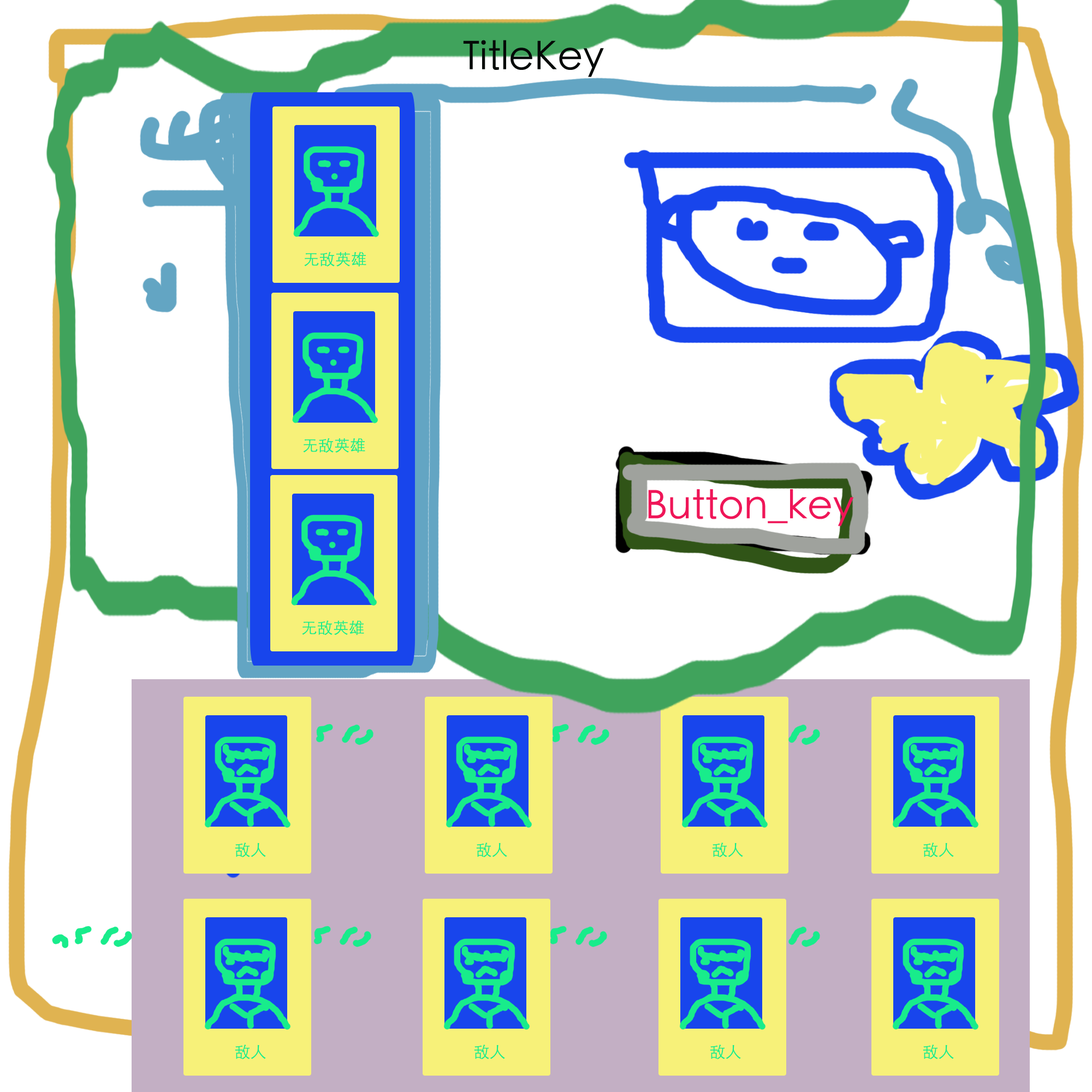
<style>
.page{position:relative;width:1092px;height:1092px;background:#ffffff}
.page>*{position:absolute;margin:0}
.t1{font:39.3px "STHeitiSC-Light";color:#050a08}
.t2{font:15.8px "STHeitiSC-Light";color:#18ec8b}
.t3{font:39.3px "STHeitiSC-Light";color:#ef1658}
</style>
<div class="page">
<p class="t1" style="left:463px;top:40px;width:141px;height:37px">TitleKey</p>
<p class="t2" style="left:304px;top:252px;width:62px;height:14px">无敌英雄</p>
<p class="t2" style="left:303px;top:438px;width:62px;height:15px">无敌英雄</p>
<p class="t3" style="left:648px;top:489px;width:206px;height:37px">Button_key</p>
<p class="t2" style="left:302px;top:620px;width:62px;height:15px">无敌英雄</p>
<p class="t2" style="left:235px;top:842px;width:31px;height:15px">敌人</p>
<p class="t2" style="left:476px;top:842px;width:31px;height:15px">敌人</p>
<p class="t2" style="left:712px;top:842px;width:31px;height:15px">敌人</p>
<p class="t2" style="left:923px;top:842px;width:31px;height:15px">敌人</p>
<p class="t2" style="left:235px;top:1044px;width:31px;height:15px">敌人</p>
<p class="t2" style="left:474px;top:1044px;width:31px;height:15px">敌人</p>
<p class="t2" style="left:710px;top:1044px;width:31px;height:15px">敌人</p>
<p class="t2" style="left:923px;top:1044px;width:31px;height:15px">敌人</p>
</div>
